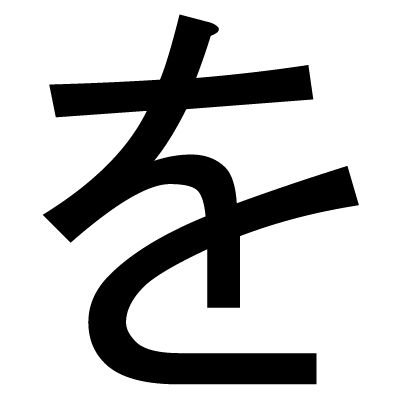
<style>
.page{position:relative;width:400px;height:400px;background:#ffffff}
.page>*{position:absolute;margin:0}
.t1{font:416.7px "MS-PGothic";color:#000000}
</style>
<div class="page">
<p class="t1" style="left:42px;top:14px;width:317px;height:371px">を</p>
</div>
